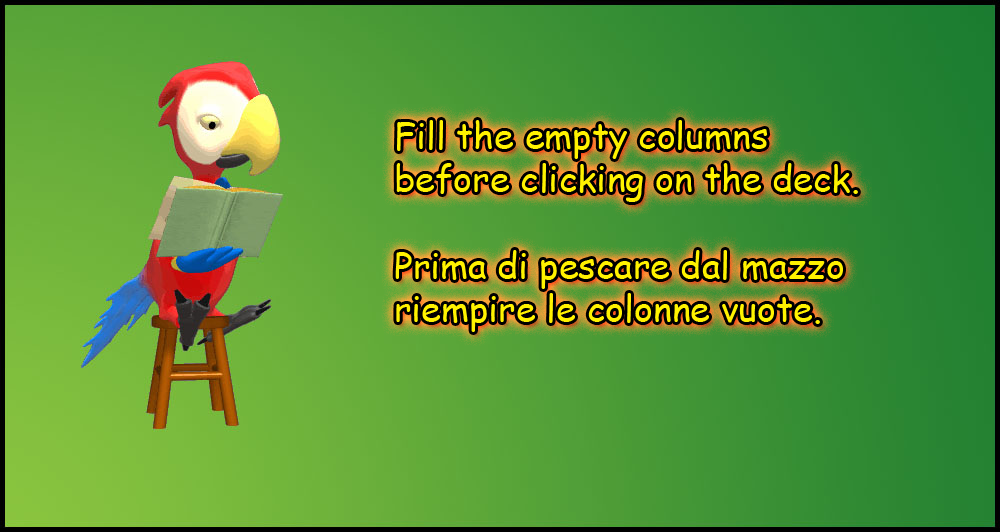
<style>
.page{position:relative;width:1000px;height:532px}
.page>*{position:absolute;margin:0}
.t1{font:36px "ComicSansMS";color:#fff200}
</style>
<div class="page">
<p class="t1" style="left:395px;top:120px;width:463px;height:212px">Fill the empty columns<br>before clicking on the deck.<br><br>Prima di pescare dal mazzo<br>riempire le colonne vuote.</p>
</div>
